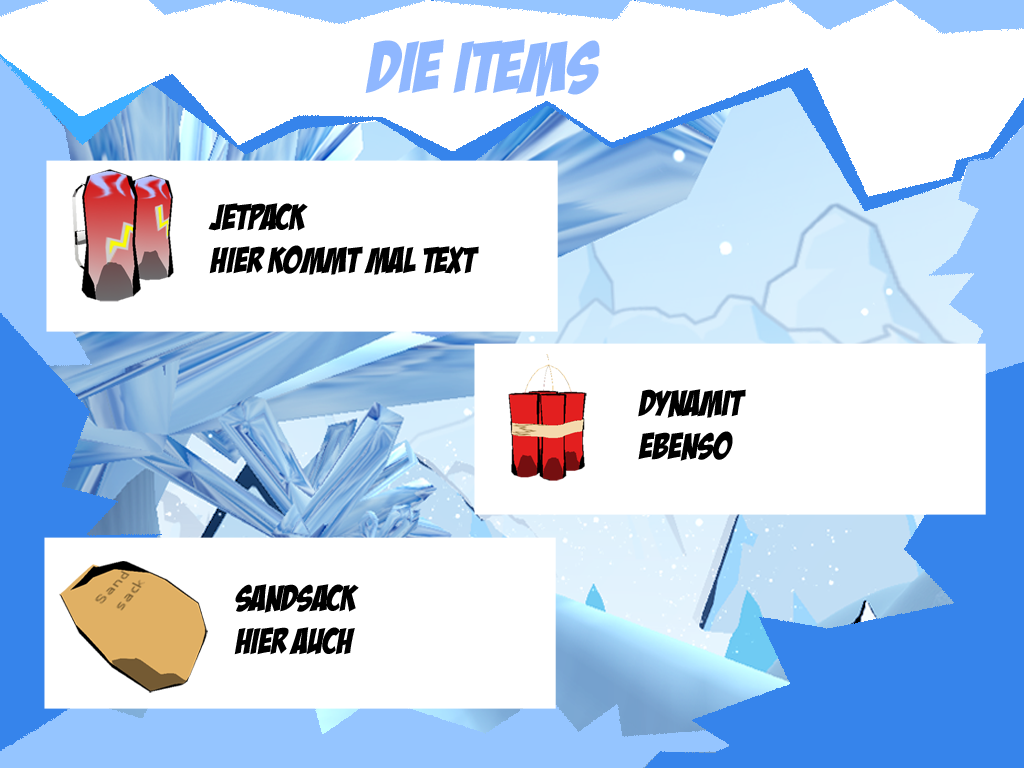
<style>
.page{position:relative;width:1024px;height:768px;background:#ffffff}
.page>*{position:absolute;margin:0}
.t1{font:72px "BadaBoomBB";color:#8fb7ff}
.t2{font:36px "BadaBoomBB";color:#000000}
</style>
<div class="page">
<p class="t1" style="left:365px;top:39px;width:235px;height:58px">Die Items</p>
<p class="t2" style="left:208px;top:203px;width:271px;height:72px">Jetpack<br>hier kommt mal Text</p>
<p class="t2" style="left:638px;top:389px;width:108px;height:72px">Dynamit<br>ebenso</p>
<p class="t2" style="left:234px;top:584px;width:125px;height:71px">Sandsack<br>hier auch</p>
</div>
